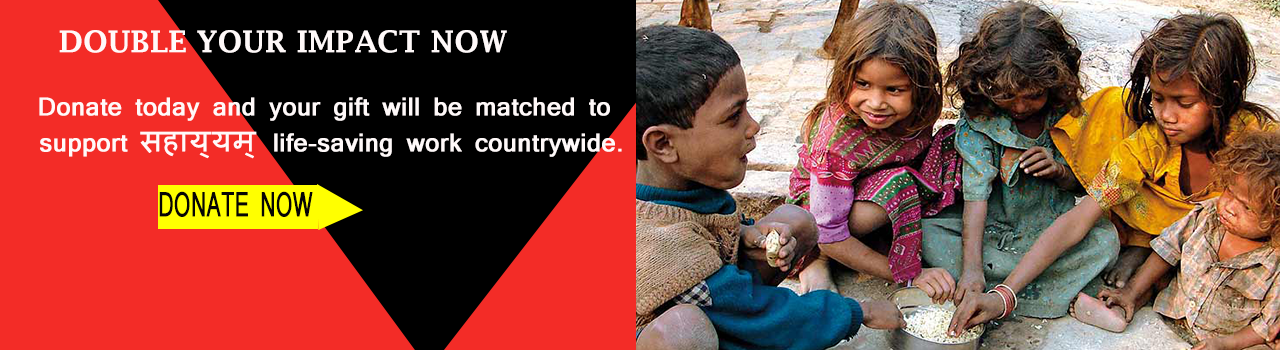
<style>
.page{position:relative;width:1280px;height:350px;background:#f32c27}
.page>*{position:absolute;margin:0}
.t1{font:30px "LucidaFax-Demi";color:#fff9f9;text-transform:uppercase}
.t2{font:24px/36px "Mangal";letter-spacing:0.005em;color:#fff9f9;font-weight:bold}
.t3{font:30px/36px "Mangal";letter-spacing:0.005em;color:#fff9f9;font-weight:bold}
.t4{font:32.2px "Mangal";letter-spacing:0.005em;color:#060404;font-weight:bold;scale:0.63 1}
</style>
<div class="page">
<p class="t1" style="left:59px;top:30px;width:448px;height:23px">DOUBLE YOUR IMPACT NOW</p>
<p class="t2" style="left:39px;top:97px;width:583px;height:62px;text-align:right">Donate today and your gift will be matched to <br>support <span class="t3">सहाय्यम् </span>life-saving work countrywide.</p>
<p class="t4" style="left:159px;top:191px;width:154px;height:26px">DONATE NOW</p>
</div>
